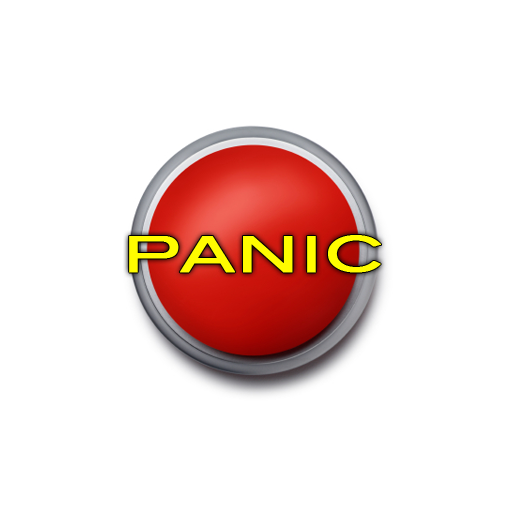
<style>
.page{position:relative;width:512px;height:512px;background:#ffffff}
.page>*{position:absolute;margin:0}
.t1{font:48px "BlairMdITCTTMedium";color:#fffc00;font-weight:bold;scale:1.22 1}
</style>
<div class="page">
<p class="t1" style="left:129px;top:235px;width:252px;height:38px">PANIC</p>
</div>
